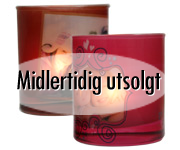
<style>
.page{position:relative;width:180px;height:150px;background:#ffffff}
.page>*{position:absolute;margin:0}
.t1{font:30px "TwCenMT-Condensed";letter-spacing:-0.035em;color:#000000}
.t2{font:30px "TwCenMT-Condensed";letter-spacing:-0.035em}
</style>
<div class="page">
<p class="t1" style="left:17px;top:70px;width:144px;height:25px">Midlertidig utsolgt</p>
<p class="t2" style="left:18px;top:71px;width:144px;height:25px">Midlertidig utsolgt</p>
</div>
